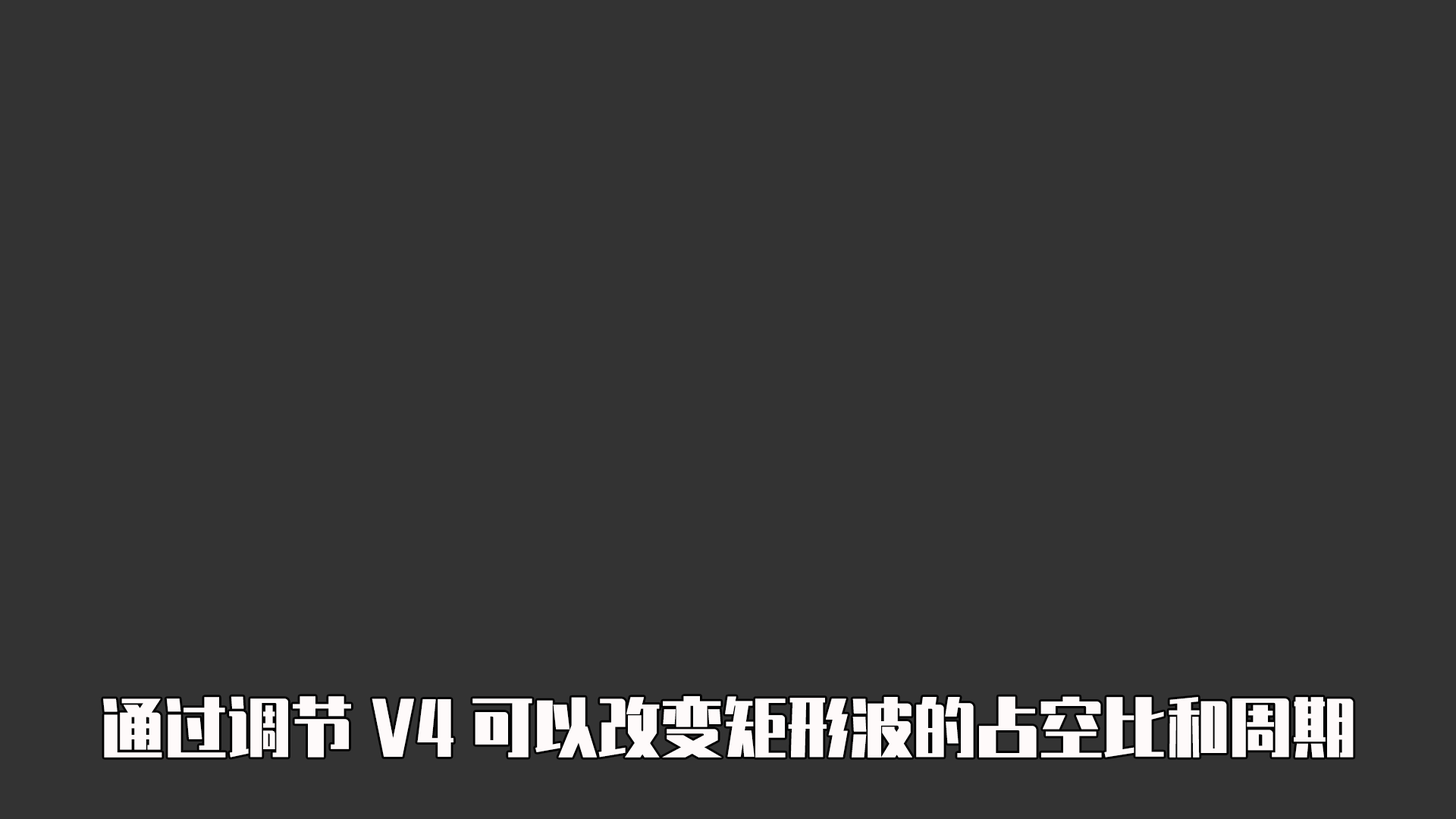
<style>
.page{position:relative;width:1456px;height:819px;background:#333333}
.page>*{position:absolute;margin:0}
.t1{font:63.2px "ZhenyanGB-Regular";color:#fefafa}
</style>
<div class="page">
<p class="t1" style="left:103px;top:696px;width:1251px;height:62px">通过调节V4可以改变矩形波的占空比和周期</p>
</div>
